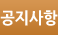
<style>
.page{position:relative;width:58px;height:35px}
.page>*{position:absolute;margin:0}
.t1{font:16px "NanumGothicExtraBold";color:#ffffff;scale:0.95 1}
</style>
<div class="page">
<p class="t1" style="left:0px;top:10px;width:58px;height:16px">공지사항</p>
</div>
